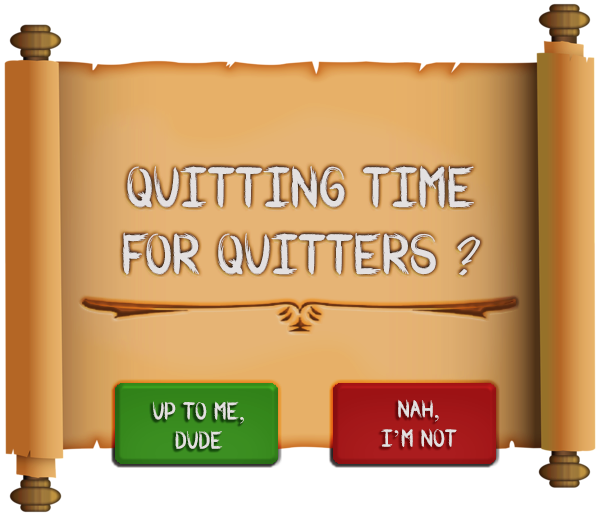
<style>
.page{position:relative;width:600px;height:516px;background:#ffffff}
.page>*{position:absolute;margin:0}
.t1{font:55.9px "WARBRUSH";color:#e3e0e0}
.t2{font:55.9px "Pristina-Regular";color:#e3e0e0}
.t3{font:24.3px "WARBRUSH";color:#e3e0e0}
.t4{font:24.3px "TimesNewRomanPSMT";color:#e3e0e0}
</style>
<div class="page">
<p class="t1" style="left:122px;top:165px;width:358px;height:111px;text-align:center">QUITTING TIME<br>FOR QUITTERS <span class="t2">?</span></p>
<p class="t3" style="left:153px;top:401px;width:91px;height:48px;text-align:center">UP TO ME<span class="t4">,</span><br>DUDE</p>
<p class="t3" style="left:381px;top:399px;width:76px;height:48px;text-align:center">NAH<span class="t4">,</span><br>I<span class="t4">’</span>M NOT</p>
</div>
